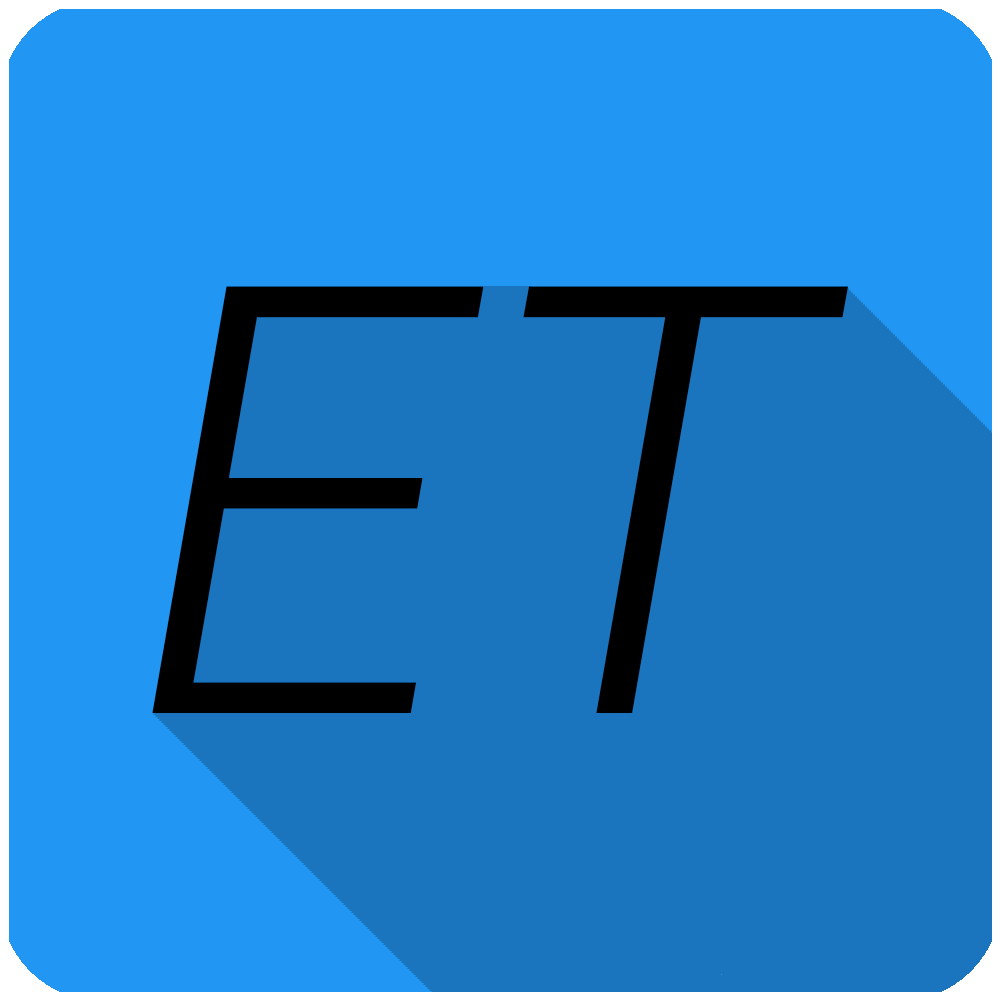
<style>
.page{position:relative;width:1000px;height:1000px;background:#1a75be}
.page>*{position:absolute;margin:0}
.t1{font:600px "Roboto-LightItalic";color:#000000}
</style>
<div class="page">
<p class="t1" style="left:152px;top:286px;width:697px;height:427px">ET</p>
</div>
